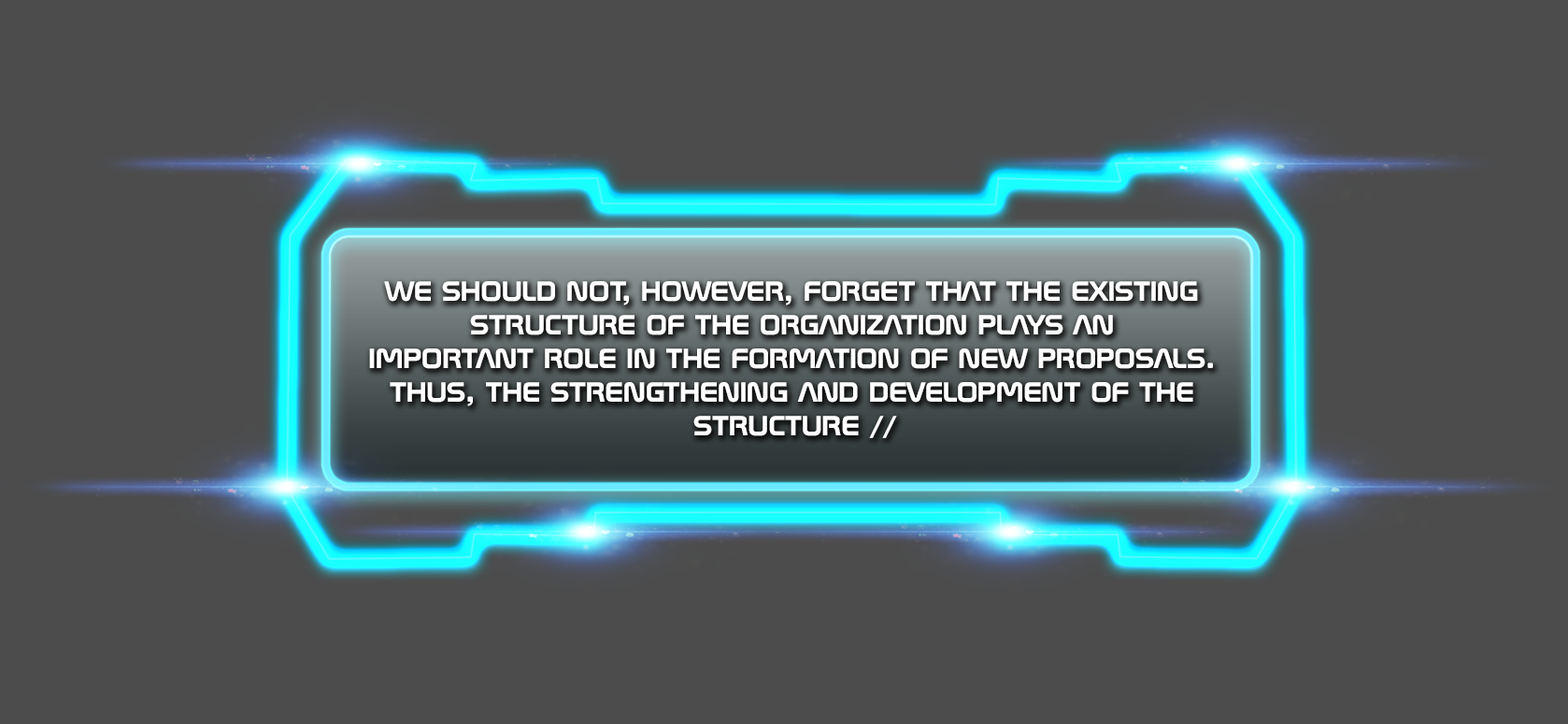
<style>
.page{position:relative;width:1568px;height:724px;background:#4c4c4c}
.page>*{position:absolute;margin:0}
.t1{font:28px "SpaceBT-Bold";color:#ffffff;text-transform:uppercase}
</style>
<div class="page">
<p class="t1" style="left:369px;top:281px;width:844px;height:157px;text-align:center">We should not, however, forget that the existing <br>structure of the organization plays an <br>important role in the formation of new proposals. <br>Thus, the strengthening and development of the <br>structure //</p>
</div>
